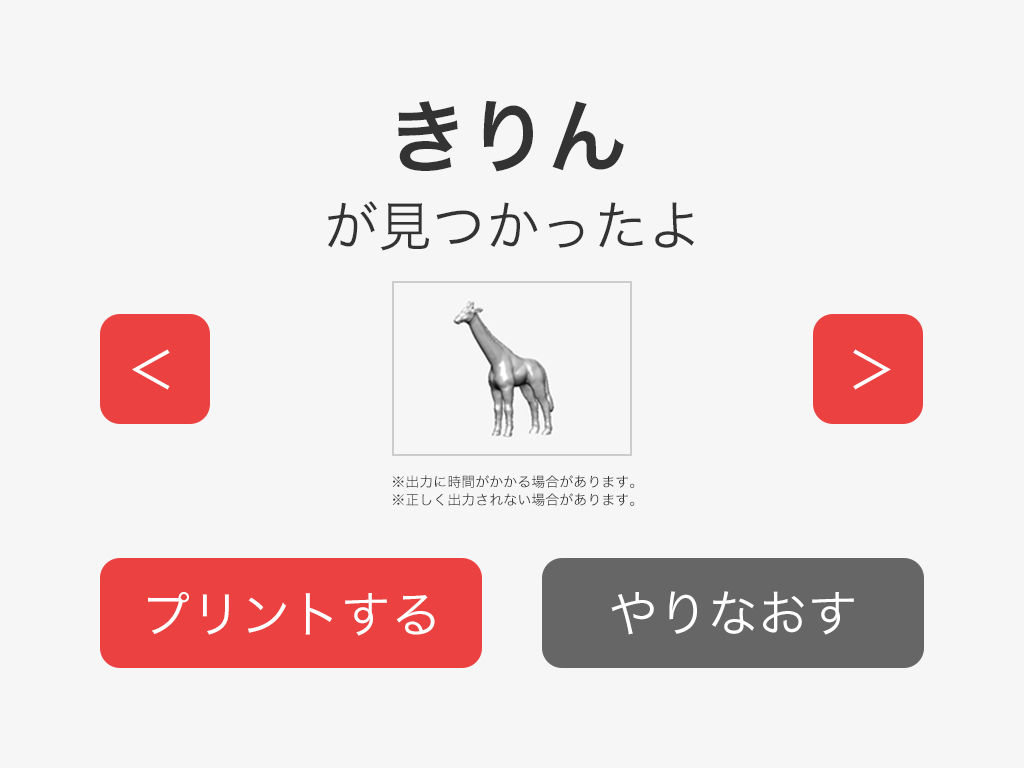
<style>
.page{position:relative;width:1024px;height:768px;background:#f6f6f6}
.page>*{position:absolute;margin:0}
.t1{font:80px "HiraKakuPro-W6";color:#333333}
.t2{font:54px "HiraKakuPro-W3";color:#333333}
.t3{font:54px "HiraKakuPro-W3";color:#ffffff}
.t4{font:14px/18px "HiraKakuPro-W3";color:#333333}
.t5{font:50px "HiraKakuPro-W3";color:#ffffff}
</style>
<div class="page">
<p class="t1" style="left:398px;top:101px;width:226px;height:71px">きりん</p>
<p class="t2" style="left:328px;top:201px;width:366px;height:50px">が見つかったよ</p>
<p class="t3" style="left:132px;top:349px;width:38px;height:41px">＜</p>
<p class="t3" style="left:853px;top:349px;width:38px;height:41px;rotate:180deg">＜</p>
<p class="t4" style="left:392px;top:475px;width:243px;height:31px">※出力に時間がかかる場合があります。<br>※正しく出力されない場合があります。</p>
<p class="t5" style="left:148px;top:592px;width:287px;height:44px">プリントする</p>
<p class="t5" style="left:611px;top:591px;width:243px;height:44px">やりなおす</p>
</div>
